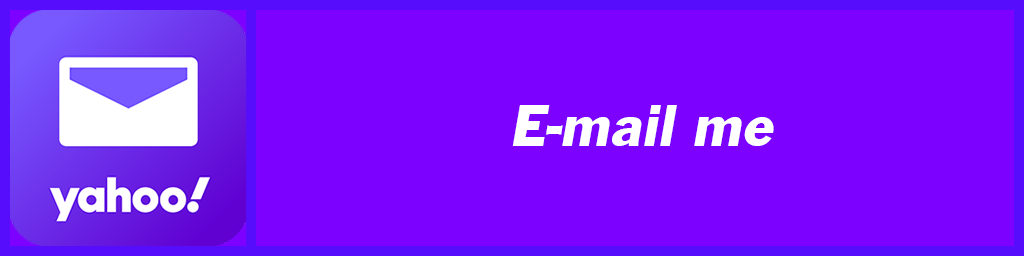
<style>
.page{position:relative;width:1024px;height:256px;background:#7d01ff}
.page>*{position:absolute;margin:0}
.t1{font:61.1px "FranklinGothicITALIC";color:#ffffff}
</style>
<div class="page">
<p class="t1" style="left:512px;top:105px;width:262px;height:41px">E-mail me</p>
</div>
